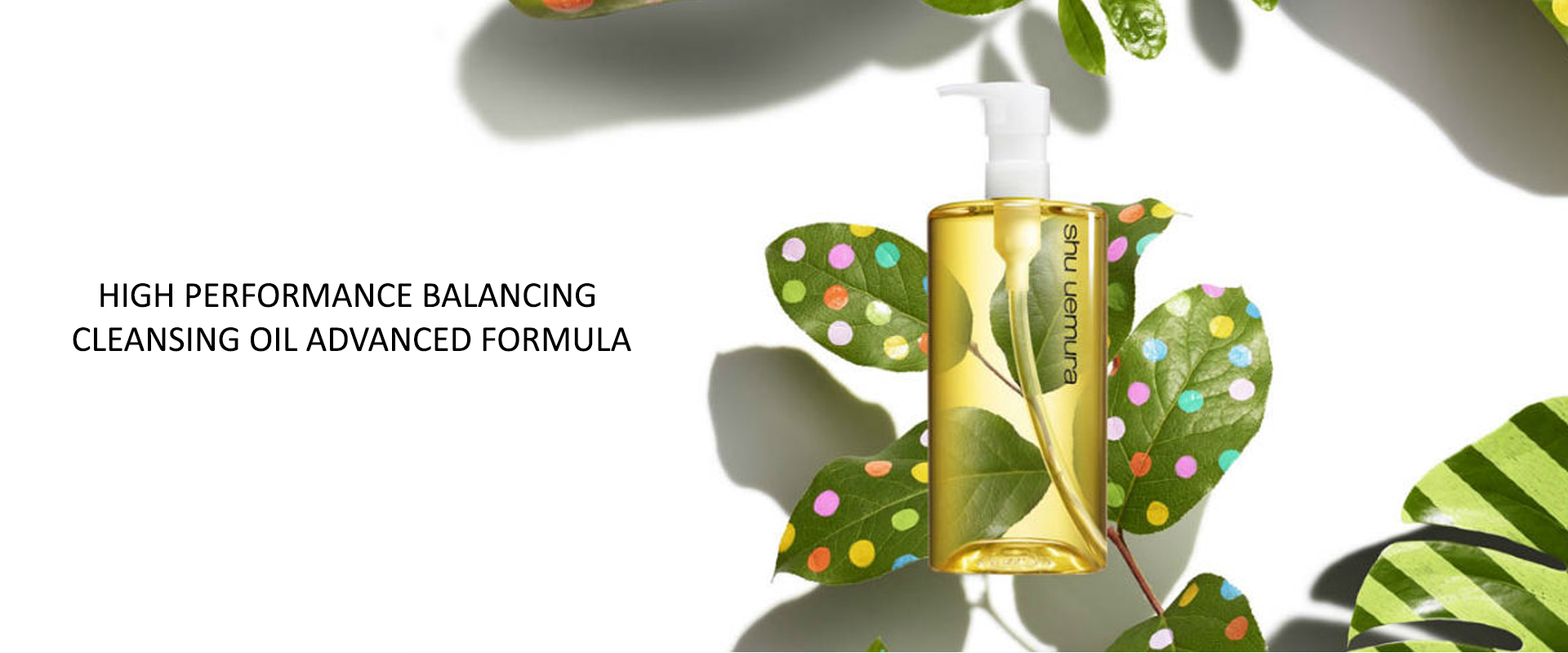
<style>
.page{position:relative;width:1568px;height:653px;background:#ffffff}
.page>*{position:absolute;margin:0}
.t1{font:36.7px "Calibri";color:#000000;text-transform:uppercase}
</style>
<div class="page">
<p class="t1" style="left:73px;top:283px;width:558px;height:69px;text-align:center">high performance balancing <br>cleansing oil advanced formula</p>
</div>
